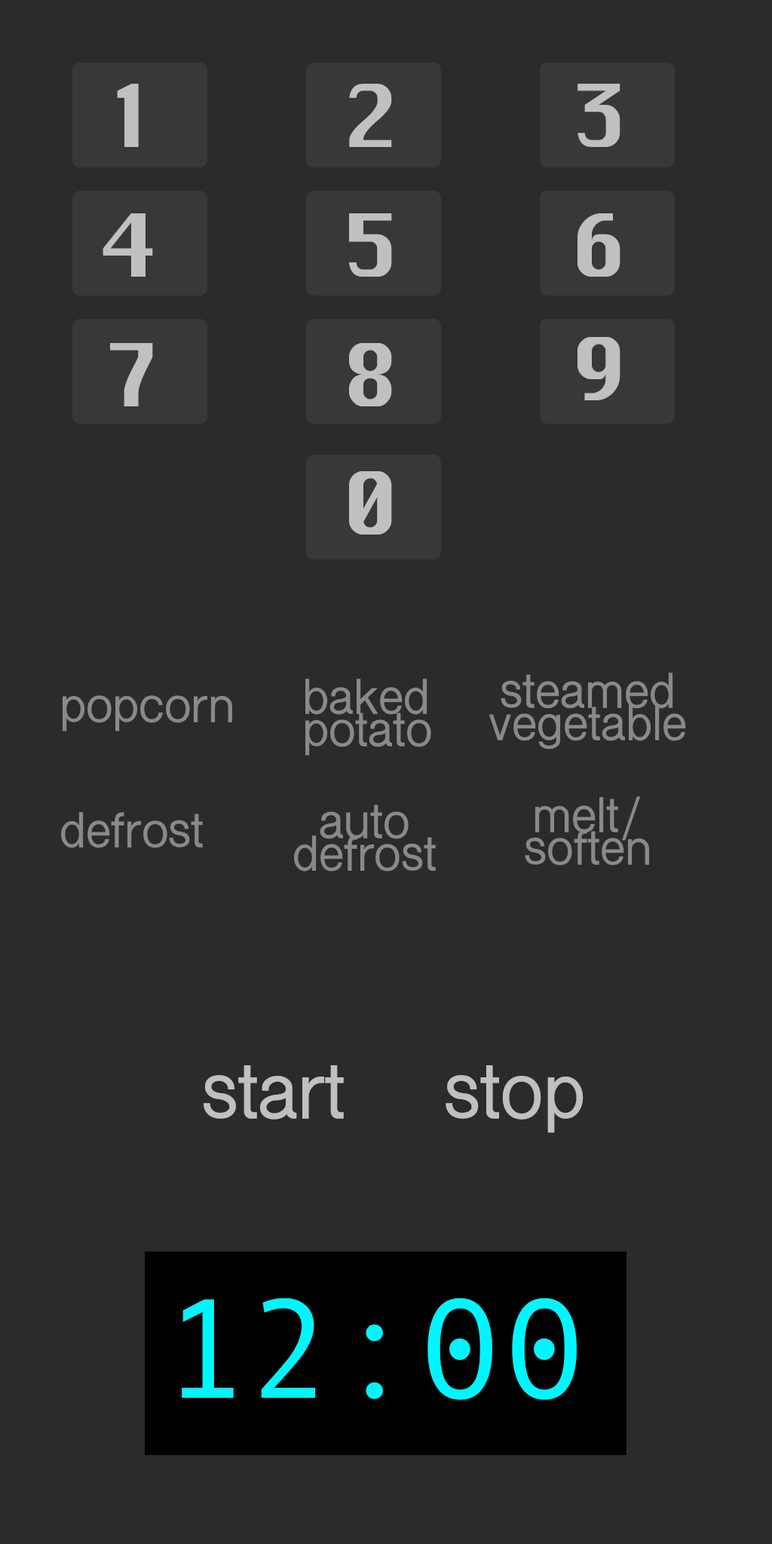
<style>
.page{position:relative;width:772px;height:1544px;background:#2b2b2b}
.page>*{position:absolute;margin:0}
.t1{font:84.4px "Silom";color:#c0c0c0}
.t2{font:46.6px/32.5px "ShreeDev0714-Bold";color:#898989}
.t3{font:46.6px "ShreeDev0714-Bold";color:#898989}
.t4{font:74.1px "ShreeDev0714-Bold";color:#c0c0c0}
.t5{font:141.5px "AndaleMono";color:#00f6ff}
</style>
<div class="page">
<p class="t1" style="left:117px;top:84px;width:22px;height:63px">1</p>
<p class="t1" style="left:349px;top:84px;width:43px;height:63px">2</p>
<p class="t1" style="left:578px;top:84px;width:43px;height:63px">3</p>
<p class="t1" style="left:103px;top:213px;width:50px;height:64px">4</p>
<p class="t1" style="left:349px;top:213px;width:43px;height:64px">5</p>
<p class="t1" style="left:578px;top:213px;width:43px;height:64px">6</p>
<p class="t1" style="left:578px;top:337px;width:43px;height:63px">9</p>
<p class="t1" style="left:110px;top:343px;width:43px;height:63px">7</p>
<p class="t1" style="left:349px;top:343px;width:43px;height:63px">8</p>
<p class="t1" style="left:349px;top:471px;width:43px;height:64px">0</p>
<p class="t2" style="left:489px;top:673px;width:197px;height:77px;text-align:center">steamed<br>vegetable</p>
<p class="t2" style="left:305px;top:679px;width:126px;height:77px">baked<br>potato</p>
<p class="t3" style="left:63px;top:695px;width:169px;height:36px">popcorn</p>
<p class="t2" style="left:525px;top:796px;width:124px;height:70px;text-align:center">melt/<br>soften</p>
<p class="t2" style="left:294px;top:805px;width:142px;height:67px;text-align:center">auto<br>defrost</p>
<p class="t3" style="left:61px;top:812px;width:142px;height:36px">defrost</p>
<p class="t4" style="left:204px;top:1065px;width:140px;height:55px">start</p>
<p class="t4" style="left:446px;top:1065px;width:138px;height:68px">stop</p>
<p class="t5" style="left:182px;top:1298px;width:395px;height:102px">12:00</p>
</div>
